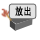
<style>
.page{position:relative;width:40px;height:40px;background:#ffffff}
.page>*{position:absolute;margin:0}
.t1{font:10px "SimHei";letter-spacing:0.1em;color:#000000;scale:0.76 1}
</style>
<div class="page">
<p class="t1" style="left:15px;top:6px;width:16px;height:10px">放出</p>
</div>
